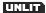
<style>
.page{position:relative;width:46px;height:13px;background:#ffffff}
.page>*{position:absolute;margin:0}
.t1{font:10.5px "BulletproofBB";color:#ffffff;scale:1.15 1}
</style>
<div class="page">
<p class="t1" style="left:6px;top:4px;width:35px;height:7px">UNLit</p>
</div>
